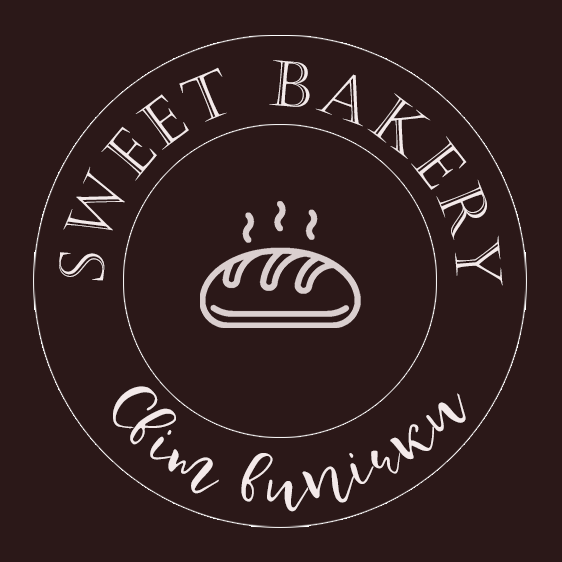
<style>
.page{position:relative;width:562px;height:562px;background:#2b1818}
.page>*{position:absolute;margin:0}
.t1{font:62.5px/100px "Castellar";letter-spacing:0.075em;color:#f4eaea}
.t2{font:70.8px/100px "Celestina";letter-spacing:0.075em;color:#f4eaea}
</style>
<div class="page">
<p class="t1" style="left:59px;top:60px;width:444px;height:226px;text-align:center">Sweet bakery</p>
<p class="t2" style="left:113px;top:386px;width:353px;height:126px;text-align:center">Світ випічки</p>
</div>
